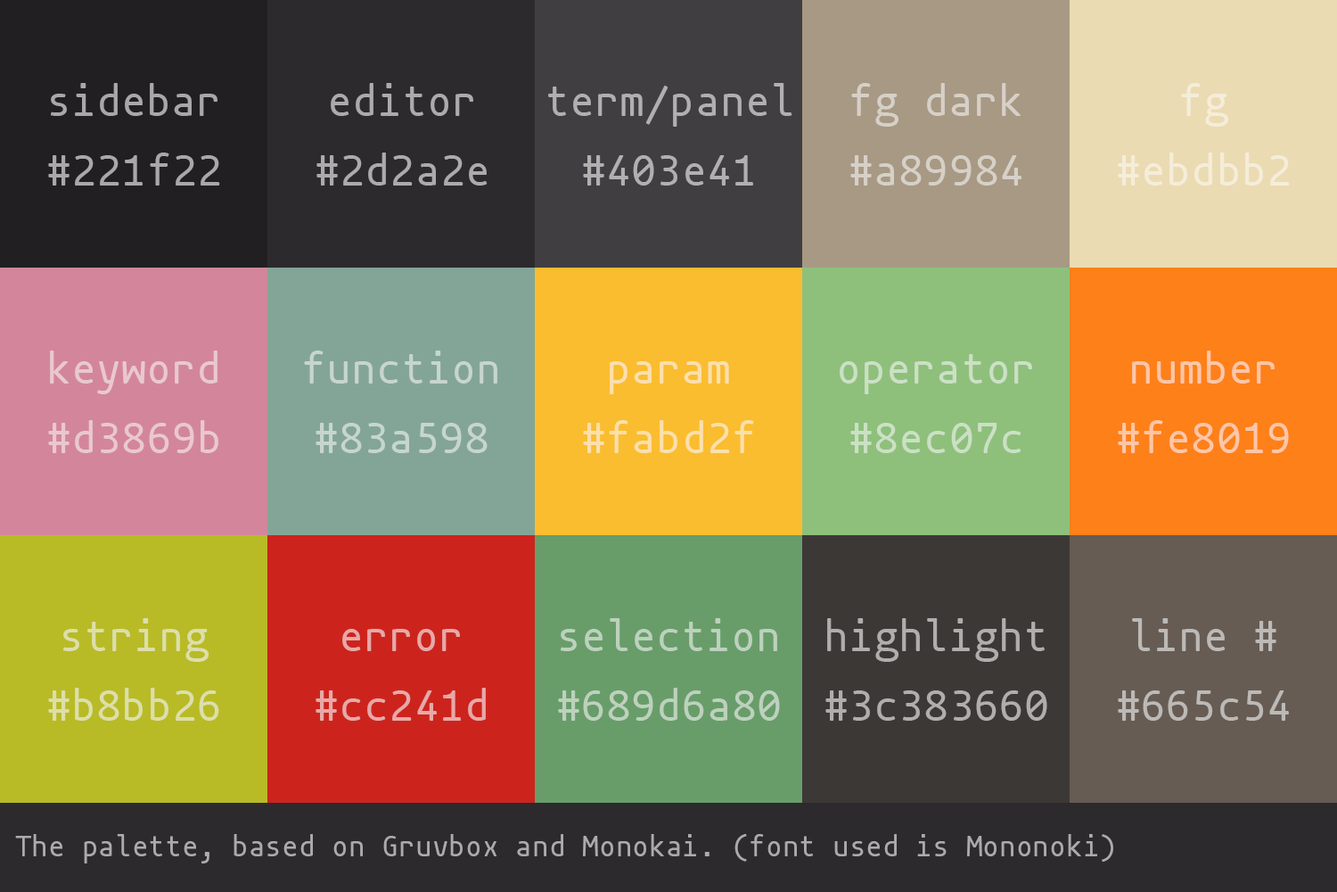
<style>
.page{position:relative;width:1337px;height:892px}
.page>*{position:absolute;margin:0}
.t1{font:44.6px "mononoki-Regular";color:#a9a8a9}
.t2{font:44.6px "mononoki-Regular";color:#ababab}
.t3{font:44.6px "mononoki-Regular";color:#b0b0b0}
.t4{font:44.6px "mononoki-Regular";color:#d6d0c7}
.t5{font:44.6px "mononoki-Regular";color:#f5edda}
.t6{font:44.6px "mononoki-Regular";color:#e9c8d0}
.t7{font:44.6px "mononoki-Regular";color:#c7d5cf}
.t8{font:44.6px "mononoki-Regular";color:#cbe0c4}
.t9{font:44.6px "mononoki-Regular";color:#fec6a7}
.t10{font:44.6px "mononoki-Regular";color:#fcdfac}
.t11{font:44.6px "mononoki-Regular";color:#dddeaa}
.t12{font:44.6px "mononoki-Regular";color:#bdd1bd}
.t13{font:44.6px "mononoki-Regular";color:#afaead}
.t14{font:44.6px "mononoki-Regular";color:#bcb9b6}
.t15{font:44.6px "mononoki-Regular";color:#e6a9a8}
.t16{font:29.7px "mononoki-Regular";color:#ababab}
</style>
<div class="page">
<p class="t1" style="left:51px;top:83px;width:167px;height:33px">sidebar</p>
<p class="t2" style="left:331px;top:83px;width:142px;height:33px">editor</p>
<p class="t3" style="left:548px;top:83px;width:245px;height:44px">term/panel</p>
<p class="t4" style="left:851px;top:83px;width:170px;height:44px">fg dark</p>
<p class="t5" style="left:1181px;top:83px;width:49px;height:44px">fg</p>
<p class="t1" style="left:48px;top:152px;width:172px;height:33px">#221f22</p>
<p class="t2" style="left:317px;top:152px;width:171px;height:33px">#2d2a2e</p>
<p class="t3" style="left:583px;top:155px;width:170px;height:30px">#403e41</p>
<p class="t4" style="left:851px;top:155px;width:171px;height:30px">#a89984</p>
<p class="t5" style="left:1118px;top:152px;width:172px;height:33px">#ebdbb2</p>
<p class="t6" style="left:50px;top:350px;width:168px;height:44px">keyword</p>
<p class="t7" style="left:304px;top:350px;width:194px;height:33px">function</p>
<p class="t8" style="left:840px;top:354px;width:192px;height:40px">operator</p>
<p class="t9" style="left:1132px;top:350px;width:143px;height:33px">number</p>
<p class="t10" style="left:610px;top:361px;width:119px;height:33px">param</p>
<p class="t6" style="left:48px;top:420px;width:170px;height:33px">#d3869b</p>
<p class="t7" style="left:316px;top:423px;width:172px;height:30px">#83a598</p>
<p class="t10" style="left:583px;top:420px;width:171px;height:33px">#fabd2f</p>
<p class="t8" style="left:851px;top:423px;width:171px;height:30px">#8ec07c</p>
<p class="t9" style="left:1118px;top:420px;width:171px;height:33px">#fe8019</p>
<p class="t11" style="left:63px;top:618px;width:147px;height:44px">string</p>
<p class="t12" style="left:561px;top:618px;width:216px;height:33px">selection</p>
<p class="t13" style="left:827px;top:618px;width:218px;height:44px">highlight</p>
<p class="t14" style="left:1132px;top:618px;width:145px;height:33px">line #</p>
<p class="t15" style="left:342px;top:629px;width:118px;height:22px">error</p>
<p class="t11" style="left:48px;top:687px;width:171px;height:33px">#b8bb26</p>
<p class="t15" style="left:316px;top:687px;width:170px;height:33px">#cc241d</p>
<p class="t12" style="left:558px;top:687px;width:222px;height:33px">#689d6a80</p>
<p class="t13" style="left:826px;top:690px;width:222px;height:30px">#3c383660</p>
<p class="t14" style="left:1118px;top:690px;width:171px;height:30px">#665c54</p>
<p class="t16" style="left:15px;top:834px;width:1099px;height:29px">The palette, based on Gruvbox and Monokai. (font used is Mononoki)</p>
</div>
